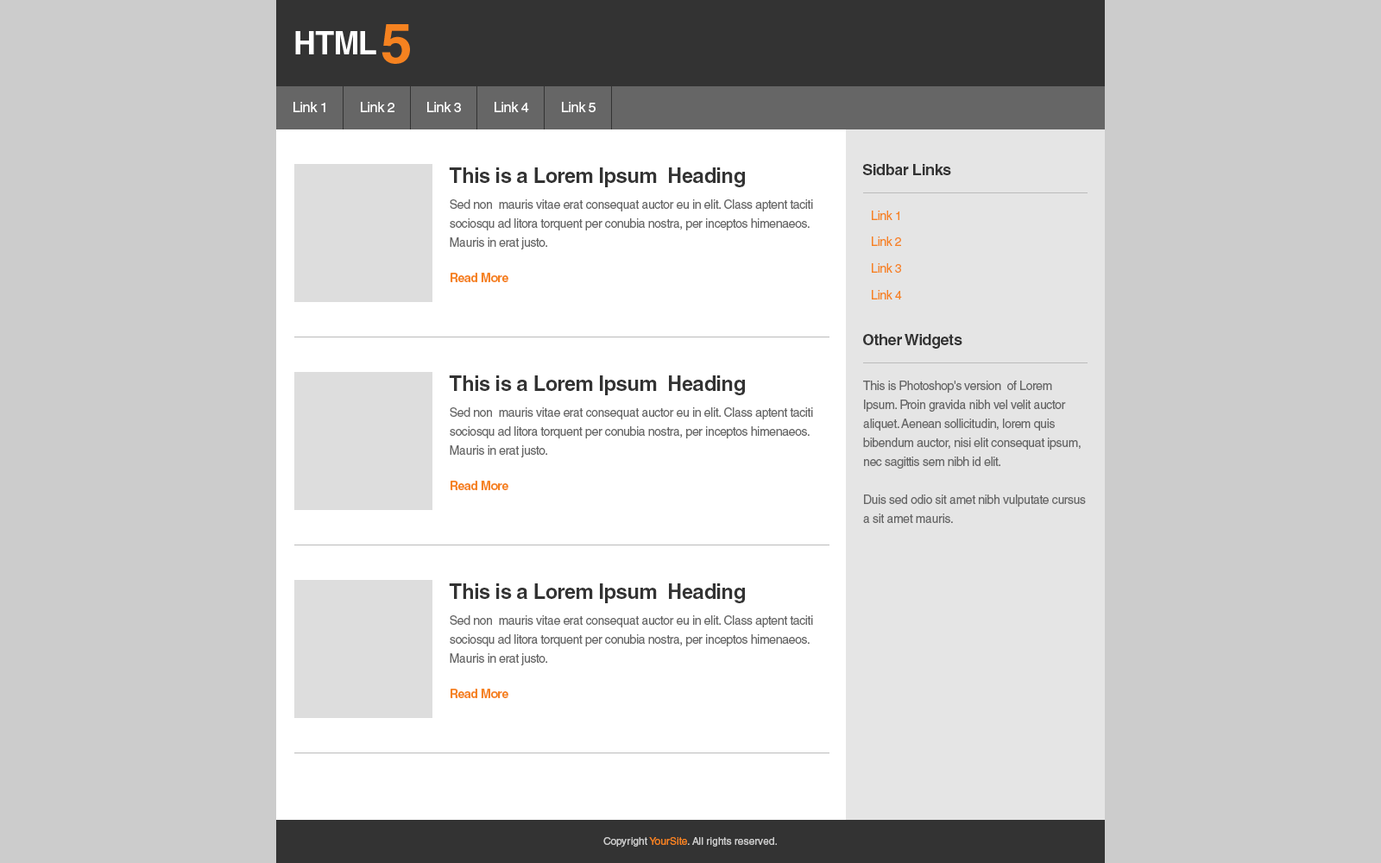
<style>
.page{position:relative;width:1381px;height:863px;background:#cccccc}
.page>*{position:absolute;margin:0}
.t1{font:13.8px "HelveticaLTStd-Roman";letter-spacing:-0.025em;color:#ffffff}
.t2{font:20.7px "HelveticaLTStd-Bold";letter-spacing:-0.025em;color:#333333}
.t3{font:15.5px "HelveticaLTStd-Bold";letter-spacing:-0.025em;color:#333333}
.t4{font:12.1px/19px "HelveticaLTStd-Roman";letter-spacing:-0.025em;color:#666666}
.t5{font:12.1px "HelveticaLTStd-Roman";letter-spacing:-0.025em;color:#f58220}
.t6{font:12.1px "HelveticaLTStd-Bold";letter-spacing:-0.025em;color:#f58220}
.t7{font:10.4px "HelveticaLTStd-Roman";color:#cccccc}
.t8{font:10.4px "HelveticaLTStd-Roman";color:#f58220}
</style>
<div class="page">
<p class="t1" style="left:294px;top:102px;width:31px;height:10px">Link 1</p>
<p class="t1" style="left:361px;top:102px;width:34px;height:10px">Link 2</p>
<p class="t1" style="left:427px;top:102px;width:34px;height:10px">Link 3</p>
<p class="t1" style="left:495px;top:102px;width:34px;height:10px">Link 4</p>
<p class="t1" style="left:562px;top:102px;width:34px;height:10px">Link 5</p>
<p class="t2" style="left:449px;top:167px;width:296px;height:20px">This is a Lorem Ipsum  Heading</p>
<p class="t3" style="left:862px;top:164px;width:89px;height:11px">Sidbar Links</p>
<p class="t4" style="left:450px;top:199px;width:363px;height:50px">Sed non  mauris vitae erat consequat auctor eu in elit. Class aptent taciti sociosqu ad litora torquent per conubia nostra, per inceptos himenaeos. Mauris in erat justo.</p>
<p class="t5" style="left:872px;top:211px;width:28px;height:9px">Link 1</p>
<p class="t5" style="left:872px;top:237px;width:29px;height:9px">Link 2</p>
<p class="t5" style="left:872px;top:263px;width:29px;height:10px">Link 3</p>
<p class="t6" style="left:451px;top:273px;width:57px;height:9px">Read More</p>
<p class="t5" style="left:872px;top:290px;width:30px;height:10px">Link 4</p>
<p class="t3" style="left:863px;top:334px;width:100px;height:15px">Other Widgets</p>
<p class="t2" style="left:449px;top:376px;width:296px;height:19px">This is a Lorem Ipsum  Heading</p>
<p class="t4" style="left:863px;top:381px;width:223px;height:142px">This is Photoshop's version  of Lorem Ipsum. Proin gravida nibh vel velit auctor aliquet. Aenean sollicitudin, lorem quis bibendum auctor, nisi elit consequat ipsum, nec sagittis sem nibh id elit. <br><br>Duis sed odio sit amet nibh vulputate cursus a sit amet mauris.</p>
<p class="t4" style="left:450px;top:407px;width:363px;height:51px">Sed non  mauris vitae erat consequat auctor eu in elit. Class aptent taciti sociosqu ad litora torquent per conubia nostra, per inceptos himenaeos. Mauris in erat justo.</p>
<p class="t6" style="left:451px;top:481px;width:57px;height:9px">Read More</p>
<p class="t2" style="left:449px;top:584px;width:296px;height:19px">This is a Lorem Ipsum  Heading</p>
<p class="t4" style="left:450px;top:616px;width:363px;height:50px">Sed non  mauris vitae erat consequat auctor eu in elit. Class aptent taciti sociosqu ad litora torquent per conubia nostra, per inceptos himenaeos. Mauris in erat justo.</p>
<p class="t6" style="left:451px;top:689px;width:57px;height:9px">Read More</p>
<p class="t7" style="left:603px;top:837px;width:174px;height:11px">Copyright <span class="t8">YourSite</span>. All rights reserved.</p>
</div>
